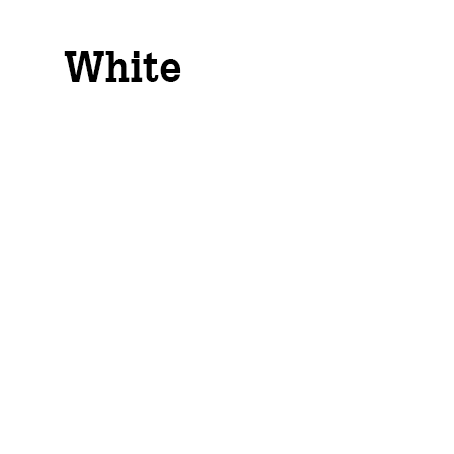
<style>
.page{position:relative;width:454px;height:454px;background:#ffffff}
.page>*{position:absolute;margin:0}
.t1{font:72px "DilleniaUPCBold";color:#000000}
</style>
<div class="page">
<p class="t1" style="left:64px;top:51px;width:117px;height:31px">White</p>
</div>
